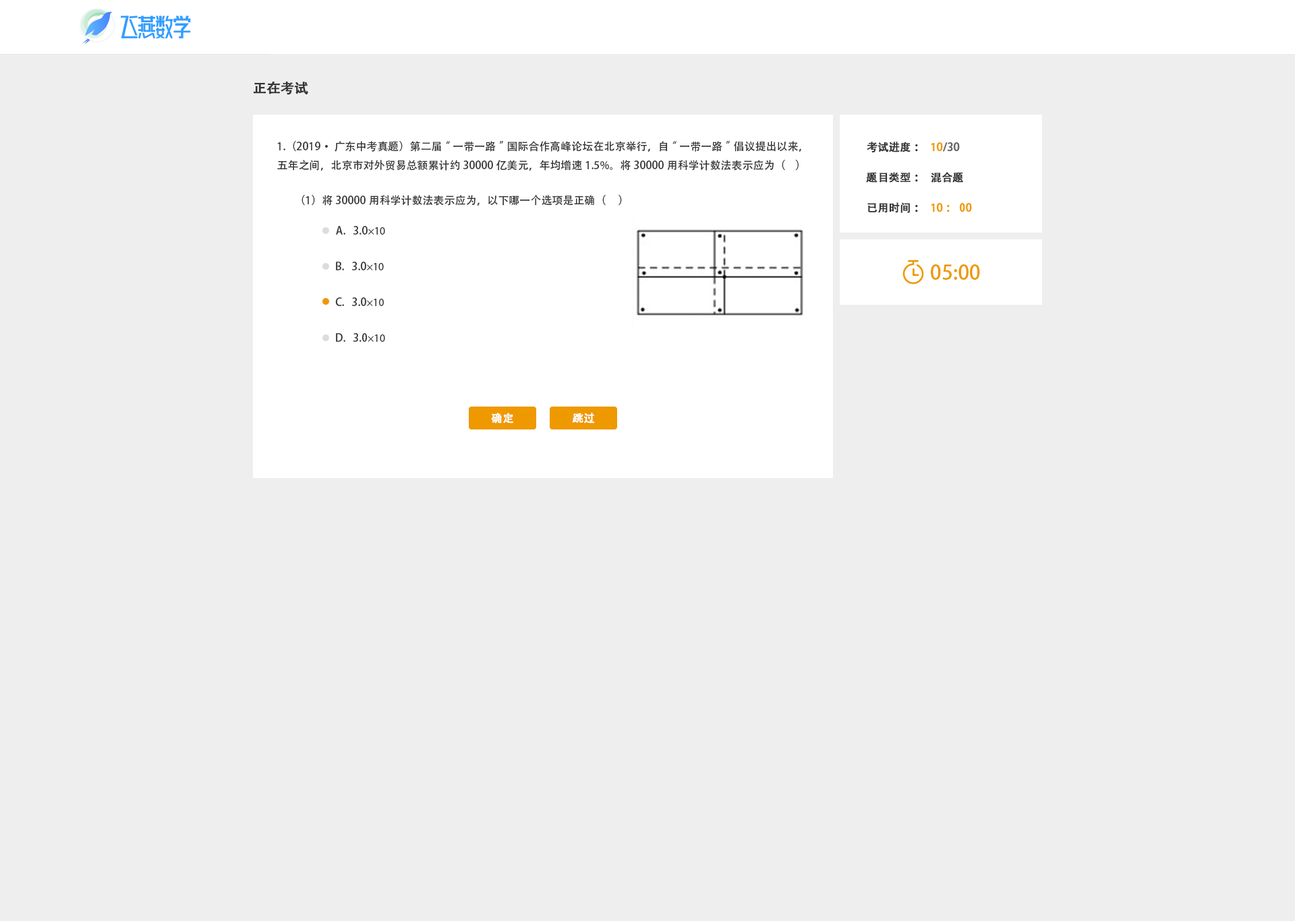
<style>
.page{position:relative;width:1295px;height:921px;background:#eeeeee}
.page>*{position:absolute;margin:0}
.t1{font:13.5px "AdobeHeitiStd-Regular";color:#333333;font-weight:bold}
.t2{font:10.8px "AdobeHeitiStd-Regular";color:#333333}
.t3{font:10.8px "AdobeHeitiStd-Regular";color:#333333;font-weight:bold}
.t4{font:10.8px "AdobeHeitiStd-Regular";color:#666666;font-weight:bold}
.t5{font:10.8px "AdobeHeitiStd-Regular";color:#ee9900;font-weight:bold}
.t6{font:10.8px "MyriadPro-Regular";color:#333333}
.t7{font:20.2px "AdobeHeitiStd-Regular";color:#ee9900}
.t8{font:10.8px "AdobeHeitiStd-Regular";color:#ffffff;font-weight:bold}
</style>
<div class="page">
<p class="t1" style="left:254px;top:81px;width:54px;height:14px">正在考试</p>
<p class="t2" style="left:277px;top:141px;width:524px;height:30px">1.（2019·广东中考真题）第二届“一带一路”国际合作高峰论坛在北京举行，自“一带一路”倡议提出以来，五年之间，北京市对外贸易总额累计约30000亿美元，年均增速1.5%。将30000用科学计数法表示应为（    ）</p>
<p class="t3" style="left:866px;top:142px;width:52px;height:11px">考试进度：</p>
<p class="t4" style="left:931px;top:142px;width:29px;height:10px"><span class="t5">１0</span>/30</p>
<p class="t3" style="left:866px;top:172px;width:52px;height:11px">题目类型：</p>
<p class="t3" style="left:931px;top:172px;width:33px;height:11px">混合题</p>
<p class="t2" style="left:301px;top:195px;width:321px;height:11px">（1）将30000用科学计数法表示应为，以下哪一个选项是正确（     ）</p>
<p class="t3" style="left:867px;top:202px;width:51px;height:11px">已用时间：</p>
<p class="t5" style="left:931px;top:203px;width:41px;height:9px">１0：00</p>
<p class="t2" style="left:336px;top:226px;width:49px;height:9px">A.   3.0<span class="t6">×10</span></p>
<p class="t2" style="left:336px;top:262px;width:48px;height:8px">B.   3.0<span class="t6">×10</span></p>
<p class="t7" style="left:931px;top:264px;width:49px;height:16px">05:00</p>
<p class="t2" style="left:335px;top:297px;width:49px;height:9px">C.   3.0<span class="t6">×10</span></p>
<p class="t2" style="left:336px;top:333px;width:49px;height:9px">D.   3.0<span class="t6">×10</span></p>
<p class="t8" style="left:491px;top:413px;width:22px;height:10px">确定</p>
<p class="t8" style="left:572px;top:413px;width:23px;height:10px">跳过</p>
</div>
